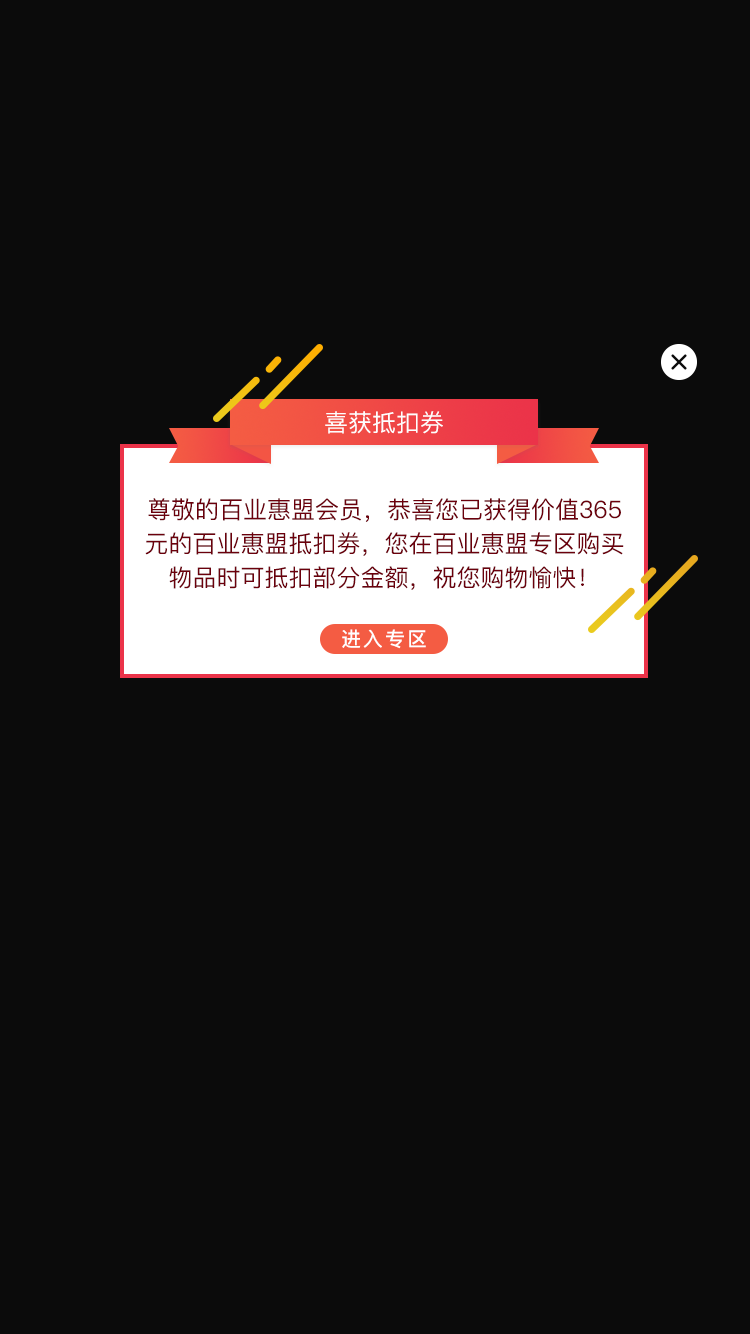
<style>
.page{position:relative;width:750px;height:1334px;background:#0b0b0b}
.page>*{position:absolute;margin:0}
.t1{font:24px "PingFang-SC-Medium";color:#fefefe;text-transform:uppercase}
.t2{font:24px/34px "PingFang-SC-Medium";color:#6b000c;text-transform:uppercase}
.t3{font:20px "PingFang-SC-Bold";letter-spacing:0.1em;color:#ffffff}
</style>
<div class="page">
<p class="t1" style="left:325px;top:411px;width:118px;height:23px">喜获抵扣券</p>
<p class="t2" style="left:145px;top:498px;width:479px;height:92px;text-align:center">尊敬的百业惠盟会员，恭喜您已获得价值365<br>元的百业惠盟抵扣劵，您在百业惠盟专区购买<br>物品时可抵扣部分金额，祝您购物愉快！</p>
<p class="t3" style="left:342px;top:629px;width:84px;height:20px">进入专区</p>
</div>
